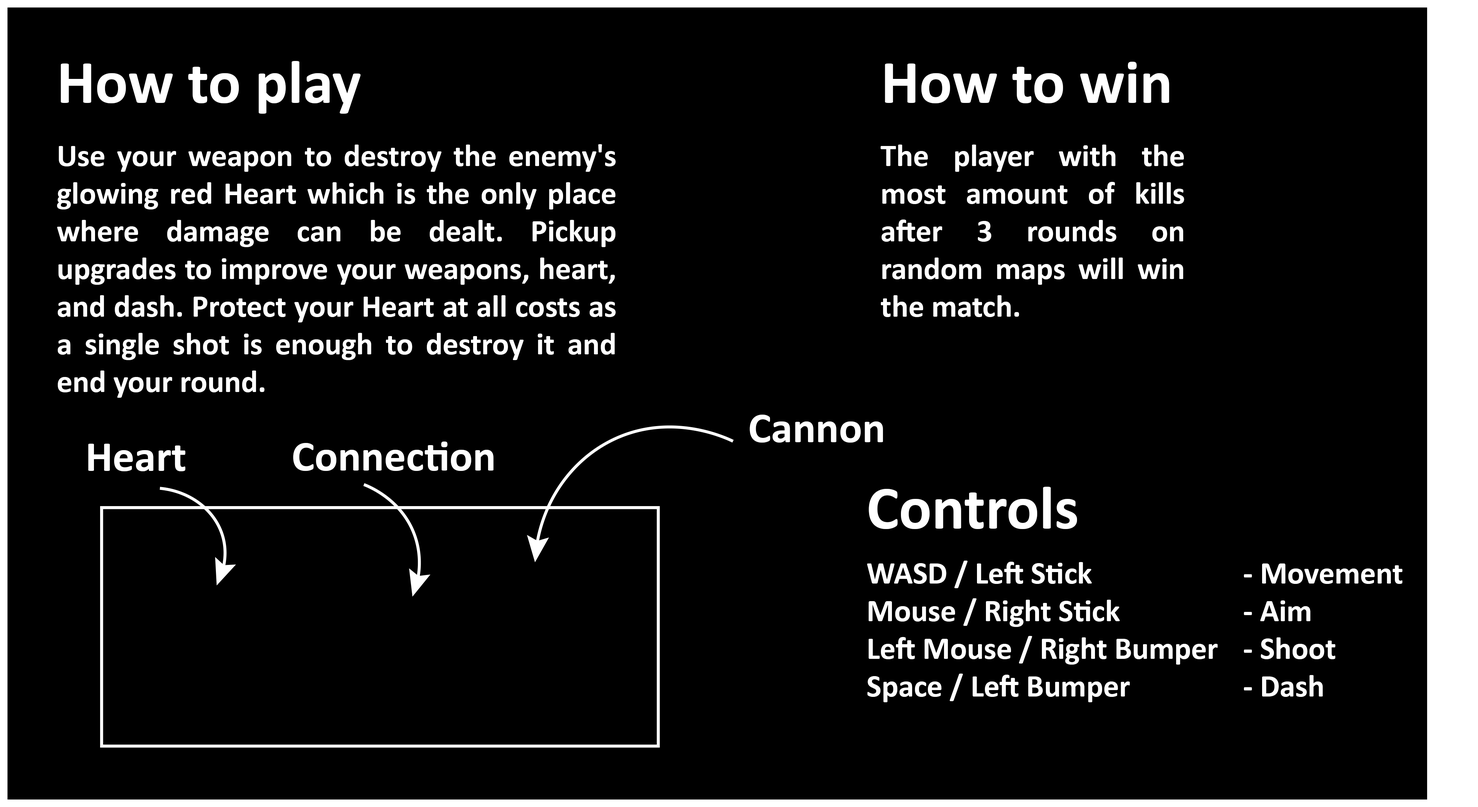
<style>
.page{position:relative;width:1478px;height:807px;background:#000000}
.page>*{position:absolute;margin:0}
.t1{font:61.3px "Calibri-Bold";color:#ffffff}
.t2{font:31.4px "Calibri-Bold";color:#ffffff}
.t3{font:43.3px "Calibri-Bold";color:#ffffff}
</style>
<div class="page">
<p class="t1" style="left:61px;top:61px;width:300px;height:53px">How to play</p>
<p class="t1" style="left:885px;top:62px;width:284px;height:41px">How to win</p>
<p class="t2" style="left:57px;top:144px;width:559px;height:254px;text-align:justify">Use your weapon to destroy the enemy's glowing red Heart which is the only place where damage can be dealt. Pickup upgrades to improve your weapons, heart, and dash. Protect your Heart at all costs as a single shot is enough to destroy it and end your round.</p>
<p class="t2" style="left:880px;top:145px;width:304px;height:172px;text-align:justify">The player with the most amount of kills after 3 rounds on random maps will win the match.</p>
<p class="t3" style="left:749px;top:415px;width:134px;height:28px">Cannon</p>
<p class="t3" style="left:88px;top:444px;width:97px;height:27px">Heart</p>
<p class="t3" style="left:293px;top:441px;width:200px;height:30px">Connection</p>
<p class="t1" style="left:869px;top:487px;width:208px;height:42px">Controls</p>
<p class="t2" style="left:867px;top:561px;width:536px;height:141px;text-align:justify">WASD / Left Stick       - Movement<br>Mouse / Right Stick      - Aim<br>Left Mouse / Right Bumper  - Shoot<br>Space / Left Bumper     - Dash</p>
</div>
